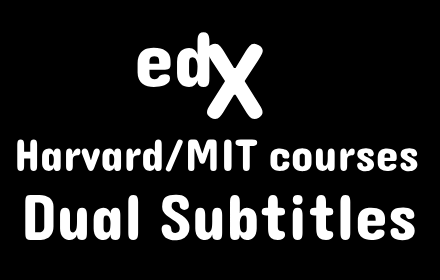
<style>
.page{position:relative;width:440px;height:280px;background:#000000}
.page>*{position:absolute;margin:0}
.t1{font:80px "Dangrek-Regular";color:#ffffff}
.t2{font:110px "Dangrek-Regular";color:#ffffff}
.t3{font:46px "Dangrek-Regular";color:#ffffff}
.t4{font:66px "Dangrek-Regular";color:#ffffff}
</style>
<div class="page">
<p class="t1" style="left:137px;top:32px;width:73px;height:55px">ed</p>
<p class="t2" style="left:207px;top:43px;width:56px;height:76px">X</p>
<p class="t3" style="left:17px;top:139px;width:401px;height:33px">Harvard/MIT courses</p>
<p class="t4" style="left:25px;top:194px;width:390px;height:47px">Dual Subtitles</p>
</div>
